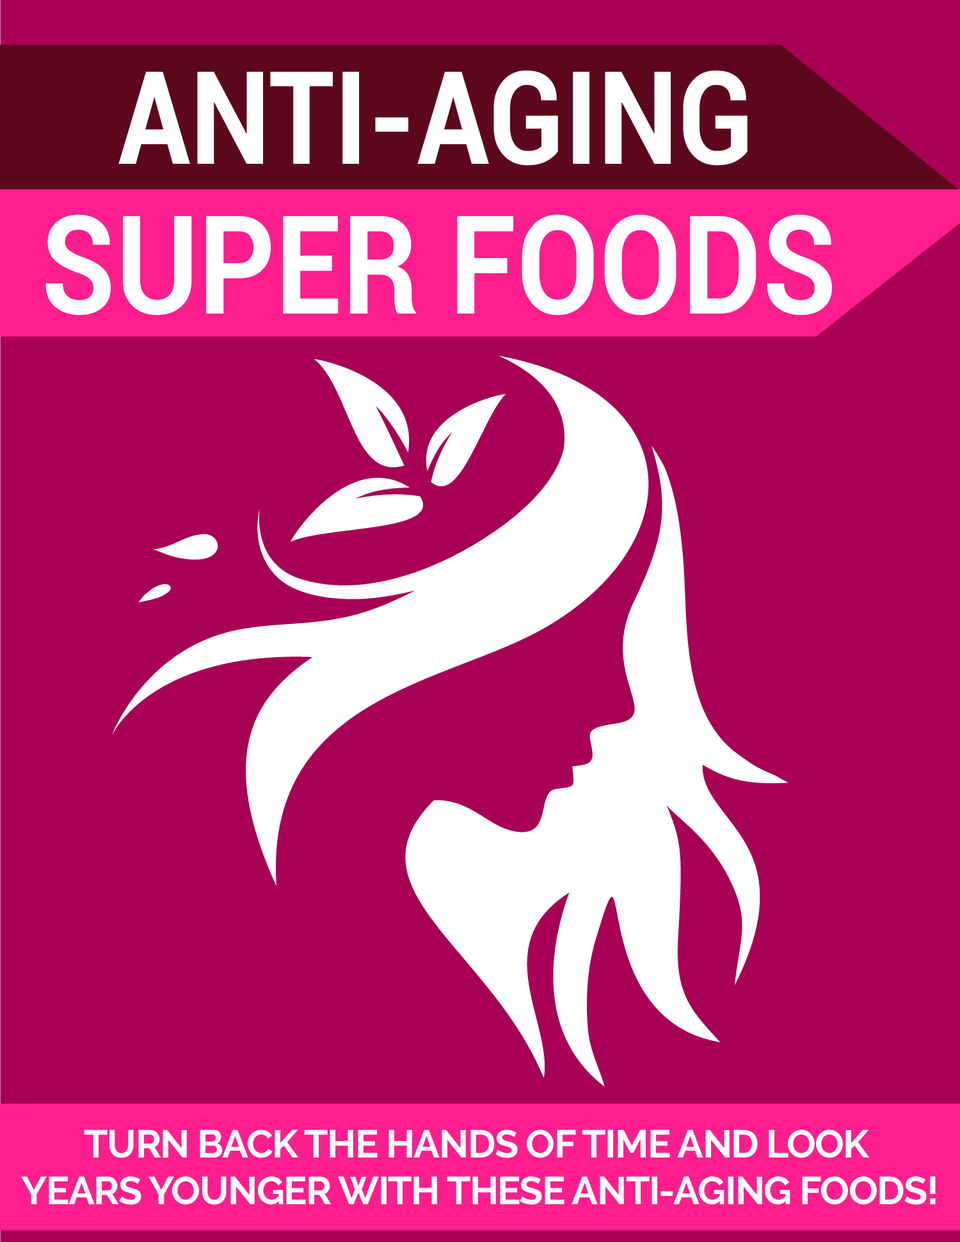
<style>
.page{position:relative;width:960px;height:1242px;background:#a80054}
.page>*{position:absolute;margin:0}
.t1{font:129.1px "Roboto-Bold";color:#ffffff;scale:0.88 1}
.t2{font:136.8px "Roboto-Bold";color:#ffffff;scale:0.88 1}
.t3{font:38.9px "Raleway-Bold";letter-spacing:-0.025em;color:#ffffff;text-transform:uppercase}
</style>
<div class="page">
<p class="t1" style="left:118px;top:70px;width:629px;height:96px">ANTI-AGING</p>
<p class="t2" style="left:45px;top:214px;width:787px;height:102px">SUPER FOODS</p>
<p class="t3" style="left:21px;top:1130px;width:915px;height:75px;text-align:center">TURN BACK THE HANDS OF TIME AND LOOK<br> YEARS YOUNGER WITH THESE ANTI-AGING FOODS!</p>
</div>
